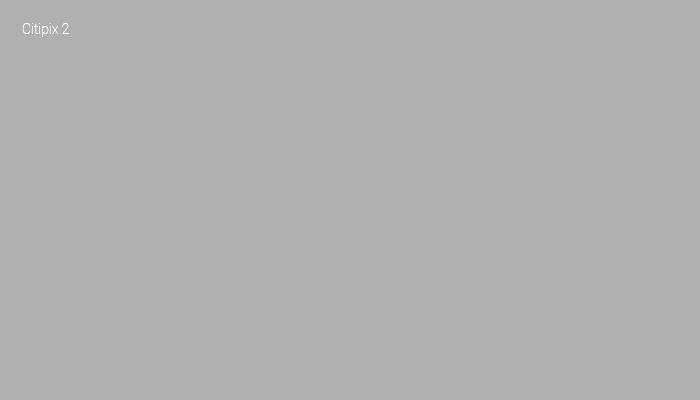
<style>
.page{position:relative;width:700px;height:400px;background:#b0b0b0}
.page>*{position:absolute;margin:0}
.t1{font:14px "Roboto-Thin";color:#ffffff}
</style>
<div class="page">
<p class="t1" style="left:22px;top:23px;width:47px;height:14px">Citipix 2</p>
</div>
